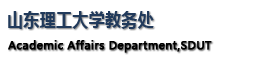
<style>
.page{position:relative;width:257px;height:60px;background:#ffffff}
.page>*{position:absolute;margin:0}
.t1{font:18px "MicrosoftYaHei";letter-spacing:0.02em;color:#213a5b;scale:0.89 1}
.t2{font:11px "MicrosoftYaHei";letter-spacing:0.02em;color:#000000;font-weight:bold}
</style>
<div class="page">
<p class="t1" style="left:8px;top:11px;width:146px;height:18px">山东理工大学教务处</p>
<p class="t2" style="left:8px;top:40px;width:204px;height:13px">Academic Affairs Department,SDUT</p>
</div>
